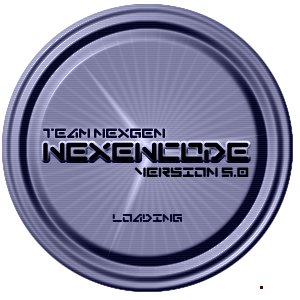
<style>
.page{position:relative;width:300px;height:300px;background:#ffffff}
.page>*{position:absolute;margin:0}
.t1{font:12px "Abduction"}
.t2{font:23px "Abduction";color:#000000}
.t3{font:12px "Abduction";color:#000000}
.t4{font:10px "Abduction"}
</style>
<div class="page">
<p class="t1" style="left:43px;top:128px;width:122px;height:10px">team nexgen</p>
<p class="t2" style="left:43px;top:142px;width:206px;height:19px">NexENCODE</p>
<p class="t3" style="left:134px;top:167px;width:115px;height:10px">version 5.0</p>
<p class="t4" style="left:112px;top:214px;width:70px;height:8px">Loading</p>
</div>
